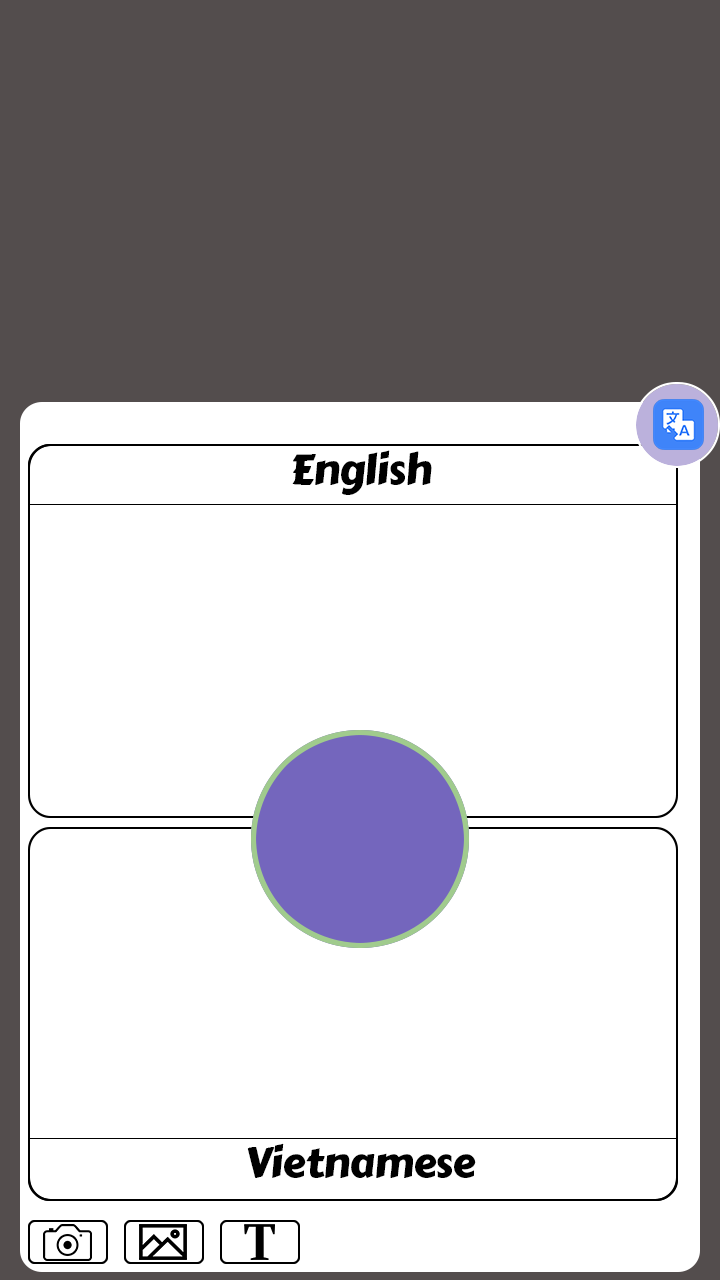
<style>
.page{position:relative;width:720px;height:1280px;background:#ffffff}
.page>*{position:absolute;margin:0}
.t1{font:42px "CarterOne";letter-spacing:-0.02em;color:#000000}
.t2{font:41.6px "CarterOne";letter-spacing:-0.02em;color:#000000}
</style>
<div class="page">
<p class="t1" style="left:292px;top:450px;width:140px;height:45px">English</p>
<p class="t2" style="left:247px;top:1143px;width:229px;height:35px">Vietnamese</p>
</div>
